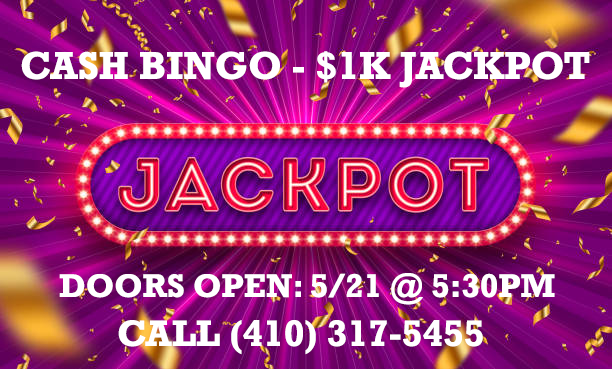
<style>
.page{position:relative;width:612px;height:369px}
.page>*{position:absolute;margin:0}
.t1{font:39.6px "Rockwell-Bold";color:#ffffff}
.t2{font:33.3px "Rockwell-Bold";color:#ffffff}
.t3{font:37.5px "Rockwell-Bold";color:#ffffff}
</style>
<div class="page">
<p class="t1" style="left:21px;top:51px;width:569px;height:37px">CASH BINGO - $1K JACKPOT</p>
<p class="t2" style="left:59px;top:273px;width:496px;height:32px">DOORS OPEN: 5/21 @ 5:30PM</p>
<p class="t3" style="left:118px;top:320px;width:365px;height:35px">CALL (410) 317-5455</p>
</div>
